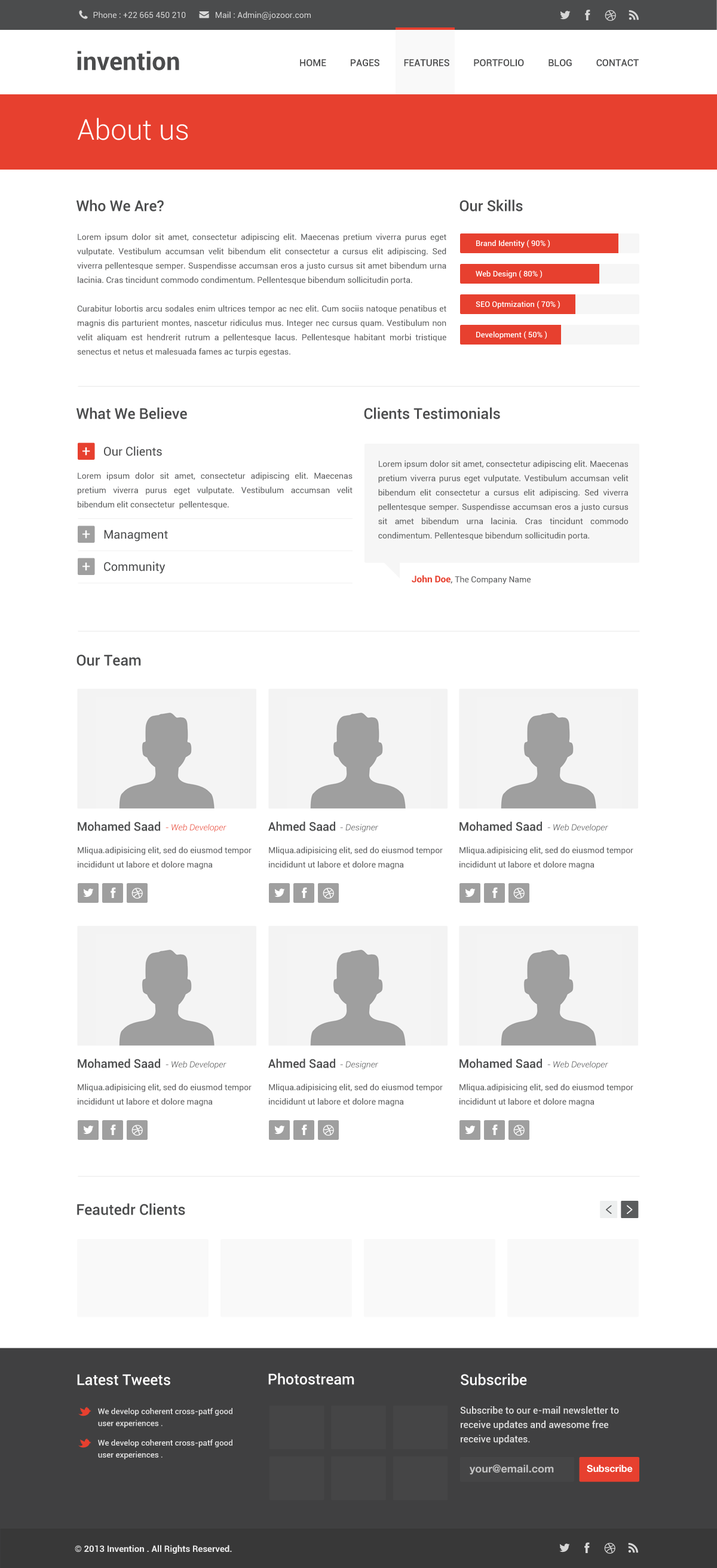
<style>
.page{position:relative;width:717px;height:1568px;background:#ffffff}
.page>*{position:absolute;margin:0}
.t1{font:8.4px "Roboto-Regular";color:#d7d7d7}
.t2{font:9.6px "Roboto-Medium";color:#4b4c4d}
.t3{font:28.7px "Roboto-Light";color:#ffffff}
.t4{font:14.9px "Roboto-Medium";color:#4b4c4d}
.t5{font:8.4px/14.3px "Roboto-Regular";color:#5c5d5e}
.t6{font:7.8px "Roboto-Medium";color:#ffffff}
.t7{font:14.9px "Roboto-Regular";color:#ffffff}
.t8{font:11.9px "Roboto-Regular";color:#4b4c4d}
.t9{font:8.4px "Roboto-Regular";color:#5c5d5e}
.t10{font:9.2px "Roboto-Bold";color:#e7402f}
.t11{font:9.2px "Roboto-Regular";color:#5c5d5e}
.t12{font:11.9px "Roboto-Medium";color:#4b4c4d}
.t13{font:8.4px "Roboto-LightItalic";color:#e7402f}
.t14{font:8.4px "Roboto-LightItalic";color:#4b4c4d}
.t15{font:14.9px "Roboto-Medium";color:#ffffff}
.t16{font:9.6px/14.3px "Roboto-Medium";color:#e1e1e1}
.t17{font:14.9px/17.1px "Roboto-Medium";color:#ffffff}
.t18{font:8px/12px "Roboto-Medium";color:#e1e1e1}
.t19{font:14.3px/4px "Roboto-Bold";color:#ffffff}
.t20{font:10.7px "HelveticaNeue-Bold";color:#c2c2c2}
.t21{font:9.6px "HelveticaNeue-Bold";color:#ffffff}
.t22{font:9px "Roboto-Bold";color:#eaeaea}
</style>
<div class="page">
<p class="t1" style="left:93px;top:11px;width:217px;height:9px">Phone : +22 665 450 210              Mail : Admin@jozoor.com</p>
<p class="t2" style="left:300px;top:59px;width:338px;height:7px">HOME          PAGES          FEATURES          PORTFOLIO          BLOG          CONTACT</p>
<p class="t3" style="left:78px;top:118px;width:110px;height:22px">About us</p>
<p class="t4" style="left:76px;top:199px;width:88px;height:12px">Who We Are?</p>
<p class="t4" style="left:459px;top:199px;width:63px;height:12px">Our Skills</p>
<p class="t5" style="left:77px;top:233px;width:369px;height:123px;text-align:justify">Lorem ipsum dolor sit amet, consectetur adipiscing elit. Maecenas pretium viverra purus eget vulputate. Vestibulum accumsan velit bibendum elit consectetur a cursus elit adipiscing. Sed viverra pellentesque semper. Suspendisse accumsan eros a justo cursus sit amet bibendum urna lacinia. Cras tincidunt commodo condimentum. Pellentesque bibendum sollicitudin porta.<br><br>Curabitur lobortis arcu sodales enim ultrices tempor ac nec elit. Cum sociis natoque penatibus et magnis dis parturient montes, nascetur ridiculus mus. Integer nec cursus quam. Vestibulum non velit aliquam est hendrerit rutrum a pellentesque lacus. Pellentesque habitant morbi tristique senectus et netus et malesuada fames ac turpis egestas.</p>
<p class="t6" style="left:476px;top:239px;width:74px;height:9px">Brand Identity ( 90% )</p>
<p class="t6" style="left:475px;top:270px;width:67px;height:8px">Web Design ( 80% )</p>
<p class="t6" style="left:475px;top:300px;width:84px;height:9px">SEO Optmization ( 70% )</p>
<p class="t6" style="left:476px;top:331px;width:71px;height:8px">Development ( 50% )</p>
<p class="t4" style="left:76px;top:407px;width:111px;height:12px">What We Believe</p>
<p class="t4" style="left:364px;top:407px;width:136px;height:12px">Clients Testimonials</p>
<p class="t7" style="left:82px;top:447px;width:8px;height:9px">+</p>
<p class="t8" style="left:104px;top:446px;width:58px;height:10px">Our Clients</p>
<p class="t5" style="left:378px;top:460px;width:250px;height:80px;text-align:justify">Lorem ipsum dolor sit amet, consectetur adipiscing elit. Maecenas pretium viverra purus eget vulputate. Vestibulum accumsan velit bibendum elit consectetur a cursus elit adipiscing. Sed viverra pellentesque semper. Suspendisse accumsan eros a justo cursus sit amet bibendum urna lacinia. Cras tincidunt commodo condimentum. Pellentesque bibendum sollicitudin porta.</p>
<p class="t5" style="left:78px;top:472px;width:274px;height:37px;text-align:justify">Lorem ipsum dolor sit amet, consectetur adipiscing elit. Maecenas pretium viverra purus eget vulputate. Vestibulum accumsan velit bibendum elit consectetur  pellentesque.</p>
<p class="t7" style="left:82px;top:530px;width:8px;height:9px">+</p>
<p class="t8" style="left:104px;top:530px;width:64px;height:12px">Managment</p>
<p class="t7" style="left:82px;top:562px;width:8px;height:9px">+</p>
<p class="t8" style="left:104px;top:561px;width:61px;height:13px">Community</p>
<p class="t9" style="left:411px;top:575px;width:119px;height:9px"><span class="t10">John Doe</span><span class="t11">, </span>The Company Name</p>
<p class="t4" style="left:76px;top:654px;width:65px;height:12px">Our Team</p>
<p class="t12" style="left:78px;top:822px;width:82px;height:9px">Mohamed Saad</p>
<p class="t12" style="left:268px;top:822px;width:67px;height:9px">Ahmed Saad</p>
<p class="t12" style="left:459px;top:822px;width:83px;height:9px">Mohamed Saad</p>
<p class="t13" style="left:165px;top:824px;width:61px;height:8px">- Web Developer</p>
<p class="t14" style="left:340px;top:824px;width:38px;height:8px">- Designer</p>
<p class="t14" style="left:547px;top:824px;width:61px;height:8px">- Web Developer</p>
<p class="t5" style="left:78px;top:847px;width:173px;height:22px">Mliqua.adipisicing elit, sed do eiusmod tempor <br>incididunt ut labore et dolore magna</p>
<p class="t5" style="left:269px;top:847px;width:173px;height:22px">Mliqua.adipisicing elit, sed do eiusmod tempor <br>incididunt ut labore et dolore magna</p>
<p class="t5" style="left:459px;top:847px;width:174px;height:22px">Mliqua.adipisicing elit, sed do eiusmod tempor <br>incididunt ut labore et dolore magna</p>
<p class="t12" style="left:78px;top:1059px;width:82px;height:9px">Mohamed Saad</p>
<p class="t14" style="left:165px;top:1061px;width:61px;height:8px">- Web Developer</p>
<p class="t12" style="left:268px;top:1059px;width:67px;height:9px">Ahmed Saad</p>
<p class="t14" style="left:340px;top:1061px;width:38px;height:8px">- Designer</p>
<p class="t12" style="left:459px;top:1059px;width:83px;height:9px">Mohamed Saad</p>
<p class="t14" style="left:547px;top:1061px;width:61px;height:8px">- Web Developer</p>
<p class="t5" style="left:78px;top:1084px;width:173px;height:22px">Mliqua.adipisicing elit, sed do eiusmod tempor <br>incididunt ut labore et dolore magna</p>
<p class="t5" style="left:269px;top:1084px;width:173px;height:22px">Mliqua.adipisicing elit, sed do eiusmod tempor <br>incididunt ut labore et dolore magna</p>
<p class="t5" style="left:459px;top:1084px;width:174px;height:22px">Mliqua.adipisicing elit, sed do eiusmod tempor <br>incididunt ut labore et dolore magna</p>
<p class="t4" style="left:77px;top:1203px;width:108px;height:12px">Feautedr Clients</p>
<p class="t15" style="left:77px;top:1374px;width:93px;height:11px">Latest Tweets</p>
<p class="t15" style="left:268px;top:1373px;width:86px;height:12px">Photostream</p>
<p class="t16" style="left:460px;top:1373px;width:159px;height:71px"><span class="t17">Subscribe<br><br><br><br></span>Subscribe to our e-mail newsletter to<br>receive updates and awesome free<br>receive updates.</p>
<p class="t18" style="left:98px;top:1408px;width:134px;height:51px"><span class="t19"><br>        </span>We develop coherent cross-patf good<br>        user experiences .<br><br>        We develop coherent cross-patf good<br>        user experiences .</p>
<p class="t20" style="left:469px;top:1464px;width:85px;height:11px">your@email.com</p>
<p class="t21" style="left:586px;top:1465px;width:46px;height:7px">Subscribe</p>
<p class="t22" style="left:75px;top:1545px;width:157px;height:9px">© 2013 Invention . All Rights Reserved.</p>
</div>
